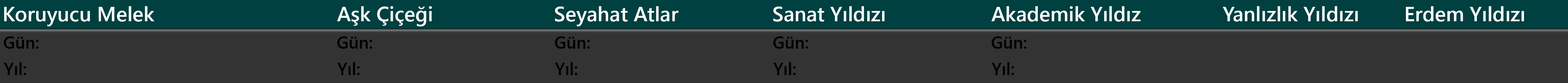
<style>
.page{position:relative;width:1568px;height:83px;background:#333333}
.page>*{position:absolute;margin:0}
.t1{font:20.7px "SegoeUI-Semibold";color:#ffffff}
.t2{font:17.2px "SegoeUI-Semibold";color:#000000}
</style>
<div class="page">
<p class="t1" style="left:4px;top:6px;width:151px;height:21px">Koruyucu Melek</p>
<p class="t1" style="left:337px;top:6px;width:95px;height:21px">Aşk Çiçeği</p>
<p class="t1" style="left:555px;top:6px;width:123px;height:21px">Seyahat Atlar</p>
<p class="t1" style="left:773px;top:6px;width:112px;height:16px">Sanat Yıldızı</p>
<p class="t1" style="left:991px;top:6px;width:150px;height:16px">Akademik Yıldız</p>
<p class="t1" style="left:1223px;top:6px;width:135px;height:16px">Yanlızlık Yıldızı</p>
<p class="t1" style="left:1406px;top:6px;width:118px;height:16px">Erdem Yıldızı</p>
<p class="t2" style="left:4px;top:37px;width:35px;height:12px">Gün:</p>
<p class="t2" style="left:337px;top:37px;width:35px;height:12px">Gün:</p>
<p class="t2" style="left:555px;top:37px;width:35px;height:12px">Gün:</p>
<p class="t2" style="left:773px;top:37px;width:35px;height:12px">Gün:</p>
<p class="t2" style="left:992px;top:37px;width:34px;height:12px">Gün:</p>
<p class="t2" style="left:4px;top:62px;width:22px;height:14px">Yıl:</p>
<p class="t2" style="left:337px;top:62px;width:23px;height:14px">Yıl:</p>
<p class="t2" style="left:555px;top:62px;width:22px;height:14px">Yıl:</p>
<p class="t2" style="left:773px;top:62px;width:23px;height:14px">Yıl:</p>
<p class="t2" style="left:992px;top:62px;width:22px;height:14px">Yıl:</p>
</div>
